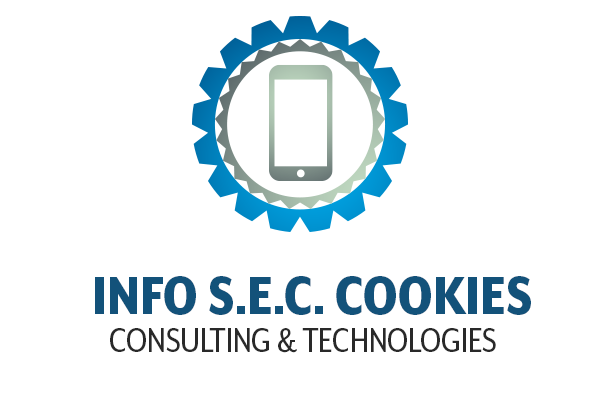
<style>
.page{position:relative;width:600px;height:400px;background:#ffffff}
.page>*{position:absolute;margin:0}
.t1{font:62.2px "MrEavesXLModNarOT-Heavy";color:#13527a}
.t2{font:38.9px "MrEavesXLModNarOT-Reg";color:#292929}
</style>
<div class="page">
<p class="t1" style="left:95px;top:276px;width:436px;height:39px">INFO S.E.C. COOKIES</p>
<p class="t2" style="left:110px;top:328px;width:386px;height:25px">CONSULTING &amp; TECHNOLOGIES</p>
</div>
